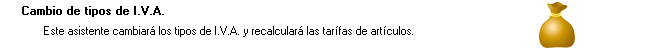
<style>
.page{position:relative;width:652px;height:52px;background:#ffffff}
.page>*{position:absolute;margin:0}
.t1{font:11.4px "MS Sans Serif";color:#000000;font-weight:bold}
.t2{font:11.4px "MS Sans Serif";color:#000000}
</style>
<div class="page">
<p class="t1" style="left:22px;top:6px;width:142px;height:11px">Cambio de tipos de I.V.A.</p>
<p class="t2" style="left:44px;top:26px;width:369px;height:11px">Este asistente cambiará los tipos de I.V.A. y recalculará las tarífas de artículos.</p>
</div>
